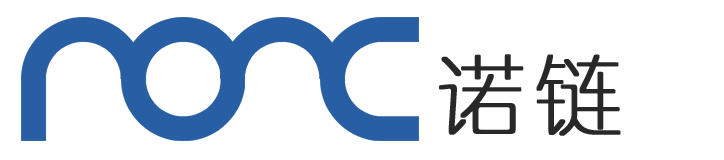
<style>
.page{position:relative;width:724px;height:160px;background:#ffffff}
.page>*{position:absolute;margin:0}
.t1{font:86.1px "STYuanti-SC-Light";letter-spacing:0.1em;color:#282828;font-weight:bold}
</style>
<div class="page">
<p class="t1" style="left:439px;top:54px;width:182px;height:82px">诺链</p>
</div>
